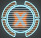
<style>
.page{position:relative;width:41px;height:38px}
.page>*{position:absolute;margin:0}
.t1{font:25px "FontinSansCR-Bold"}
</style>
<div class="page">
<p class="t1" style="left:14px;top:13px;width:13px;height:13px">x</p>
</div>
